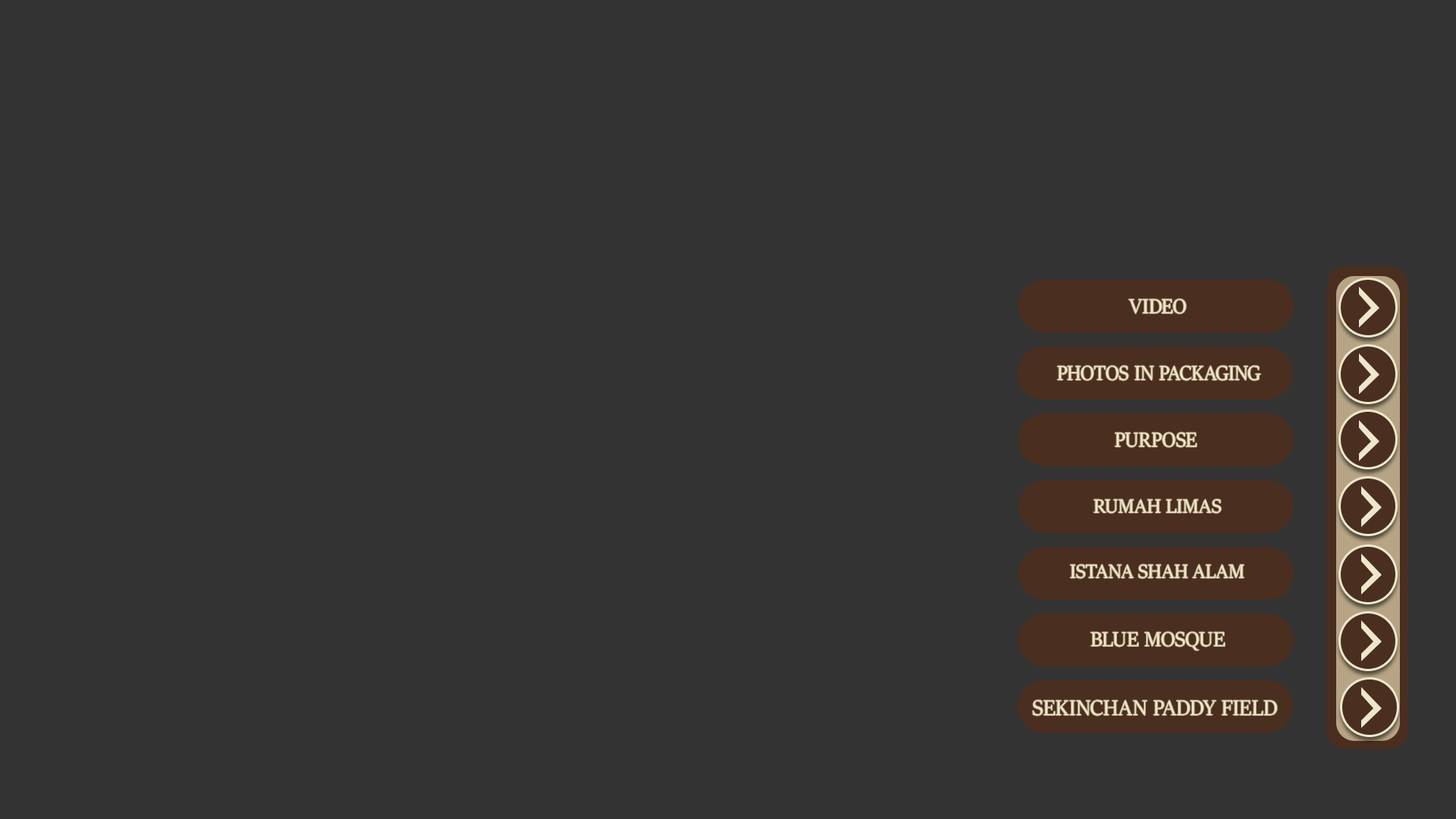
<style>
.page{position:relative;width:1456px;height:819px;background:#333333}
.page>*{position:absolute;margin:0}
.t1{font:22.6px "SitkaBanner";letter-spacing:0.01em;color:#ede8cc}
.t2{font:22.6px "SitkaBanner";letter-spacing:0.01em;color:#ede8cc;scale:0.95 1}
.t3{font:22.6px "SitkaBanner";letter-spacing:0.01em;color:#ede8cc;scale:0.96 1}
.t4{font:21.2px "SitkaBanner";letter-spacing:0.01em;color:#ede8cc}
.t5{font:23.9px "SitkaBanner";letter-spacing:0.01em;color:#ede8cc}
</style>
<div class="page">
<p class="t1" style="left:1128px;top:299px;width:58px;height:15px">VIDEO</p>
<p class="t2" style="left:1057px;top:366px;width:204px;height:15px">PHOTOS IN PACKAGING</p>
<p class="t3" style="left:1115px;top:432px;width:82px;height:15px">PURPOSE</p>
<p class="t4" style="left:1094px;top:499px;width:128px;height:14px">RUMAH LIMAS</p>
<p class="t4" style="left:1070px;top:564px;width:174px;height:15px">ISTANA SHAH ALAM</p>
<p class="t1" style="left:1090px;top:632px;width:135px;height:19px">BLUE MOSQUE</p>
<p class="t5" style="left:1033px;top:700px;width:244px;height:16px">SEKINCHAN PADDY FIELD</p>
</div>
